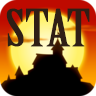
<style>
.page{position:relative;width:96px;height:96px;background:#000000}
.page>*{position:absolute;margin:0}
.t1{font:50.4px "BirchStd";color:#2f1e15;scale:1.43 1}
</style>
<div class="page">
<p class="t1" style="left:6px;top:8px;width:84px;height:39px">STAT</p>
</div>
